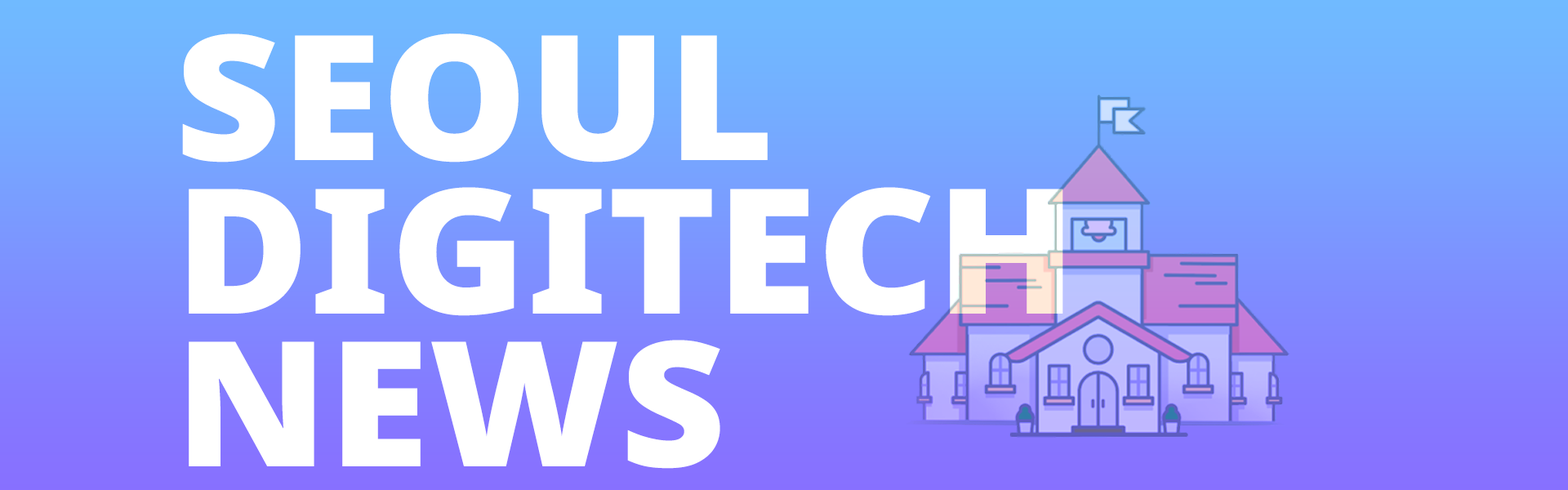
<style>
.page{position:relative;width:1568px;height:490px}
.page>*{position:absolute;margin:0}
.t1{font:174.2px/153.1px "NotoSans-Black";color:#ffffff;scale:1.05 1}
</style>
<div class="page">
<p class="t1" style="left:182px;top:33px;width:881px;height:436px">SEOUL<br>DIGITECH<br>NEWS</p>
</div>
